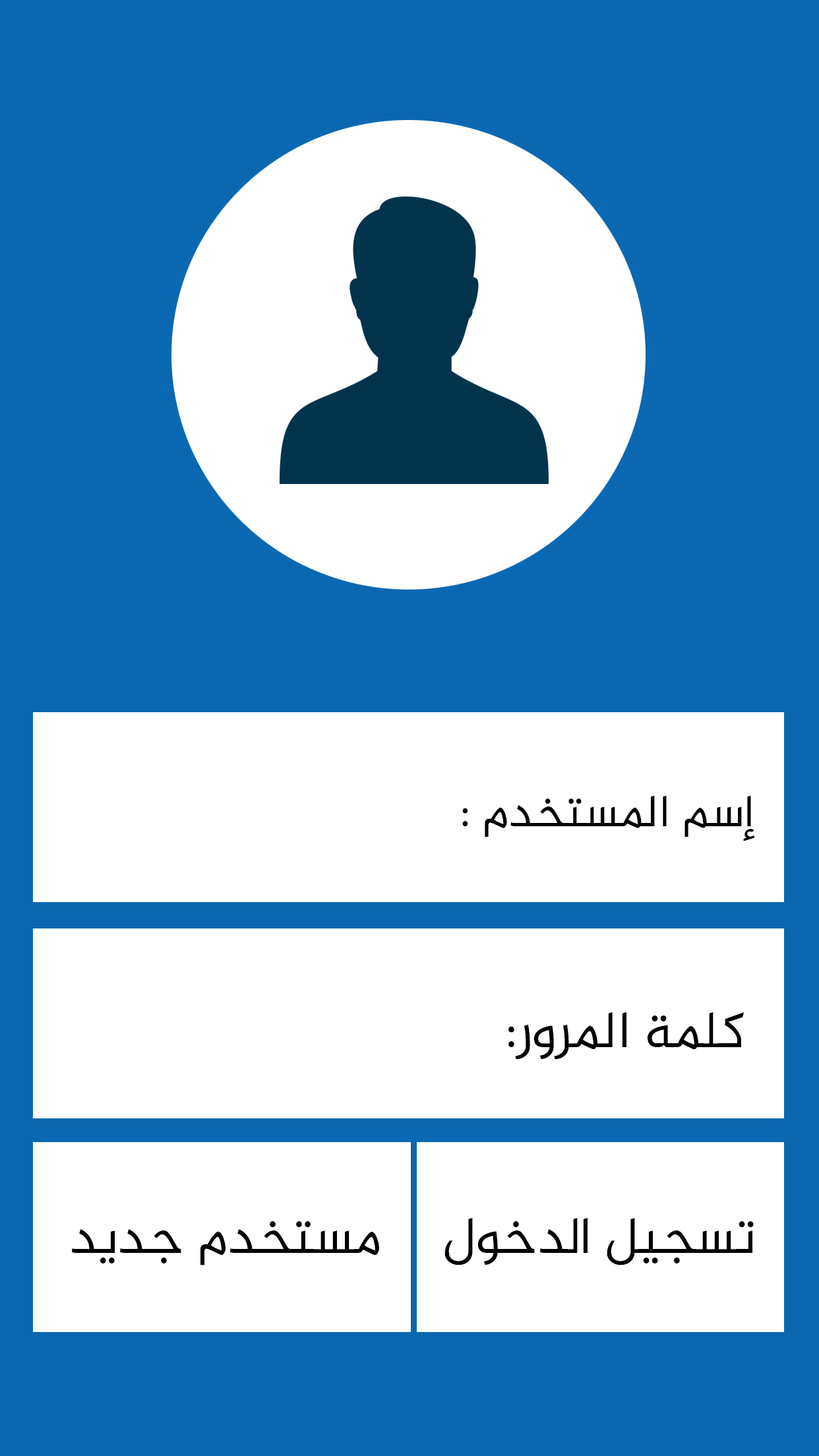
<style>
.page{position:relative;width:819px;height:1456px;background:#0a68b2}
.page>*{position:absolute;margin:0}
.t1{font:46.2px "Al-Jazeera-Arabic-Regular";color:#040000}
.t2{font:52.8px "Al-Jazeera-Arabic-Regular";color:#040000}
.t3{font:52.8px "Al-Jazeera-Arabic-Regular";color:#000101}
</style>
<div class="page">
<p class="t1" style="left:462px;top:795px;width:292px;height:46px">إسم المستخدم :</p>
<p class="t2" style="left:508px;top:1012px;width:236px;height:48px">كلمة المرور:</p>
<p class="t3" style="left:444px;top:1218px;width:310px;height:47px">تسجيل الدخول</p>
<p class="t3" style="left:72px;top:1221px;width:307px;height:44px">مستخدم جديد</p>
</div>
